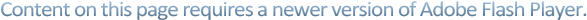
<style>
.page{position:relative;width:587px;height:20px;background:#ffffff}
.page>*{position:absolute;margin:0}
.t1{font:21.6px "Calibri";letter-spacing:-0.04em;color:#7696b2;scale:1.07 1}
</style>
<div class="page">
<p class="t1" style="left:0px;top:1px;width:587px;height:19px">Content on this page requires a newer version of Adobe Flash Player.</p>
</div>
